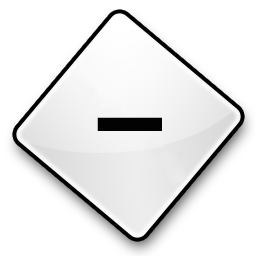
<style>
.page{position:relative;width:256px;height:256px;background:#ffffff}
.page>*{position:absolute;margin:0}
.t1{font:132px "MyriadPro-Bold";letter-spacing:0.005em;color:#020202;scale:1.86 1}
</style>
<div class="page">
<p class="t1" style="left:97px;top:117px;width:65px;height:14px">-</p>
</div>
